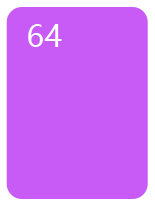
<style>
.page{position:relative;width:155px;height:206px;background:#c85bf5}
.page>*{position:absolute;margin:0}
.t1{font:30px "MicrosoftYaHei";color:#fefefe}
</style>
<div class="page">
<p class="t1" style="left:28px;top:24px;width:34px;height:23px">64</p>
</div>
